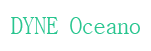
<style>
.page{position:relative;width:151px;height:51px;background:#ffffff}
.page>*{position:absolute;margin:0}
.t1{font:23.5px "BatangChe";color:#28c58f}
</style>
<div class="page">
<p class="t1" style="left:11px;top:17px;width:129px;height:17px">DYNE Oceano</p>
</div>
